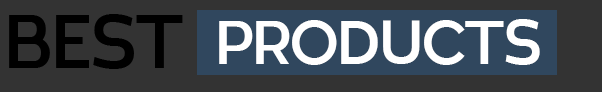
<style>
.page{position:relative;width:602px;height:92px;background:#333333}
.page>*{position:absolute;margin:0}
.t1{font:75px "ATAllowe-Regular";color:#000000}
.t2{font:62.5px "ATAllowe-Regular";color:#ffffff}
</style>
<div class="page">
<p class="t1" style="left:9px;top:14px;width:174px;height:55px">BEST</p>
<p class="t2" style="left:219px;top:19px;width:321px;height:46px">PRODUCTS</p>
</div>
